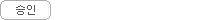
<style>
.page{position:relative;width:200px;height:20px;background:#ffffff}
.page>*{position:absolute;margin:0}
.t1{font:11px "YDIWebDotum";color:#565656}
</style>
<div class="page">
<p class="t1" style="left:16px;top:5px;width:19px;height:10px">승인</p>
</div>
